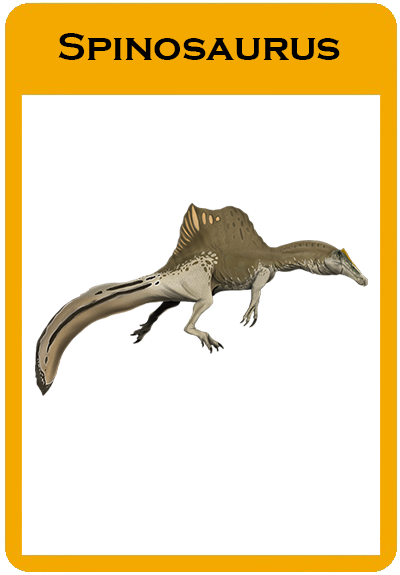
<style>
.page{position:relative;width:400px;height:575px;background:#ffffff}
.page>*{position:absolute;margin:0}
.t1{font:40px "CopperplateGothic-Bold";color:#000000}
</style>
<div class="page">
<p class="t1" style="left:58px;top:33px;width:282px;height:27px">Spinosaurus</p>
</div>
